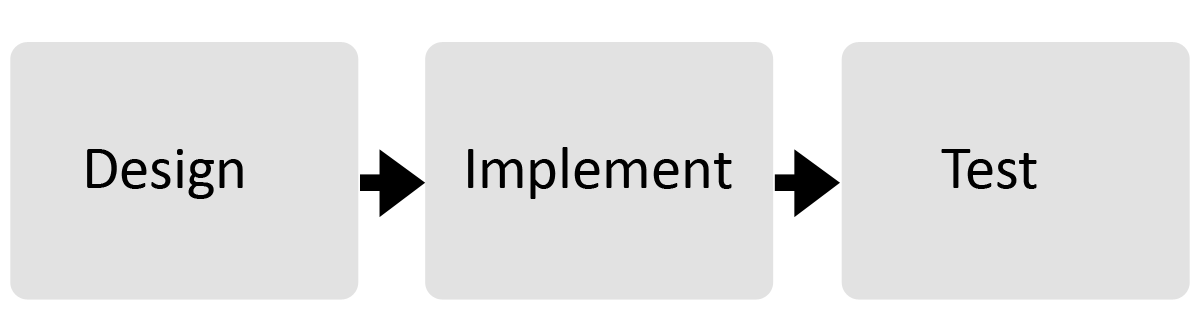
<style>
.page{position:relative;width:1200px;height:333px;background:#e2e2e2}
.page>*{position:absolute;margin:0}
.t1{font:60.7px "Calibri";color:#000000}
</style>
<div class="page">
<p class="t1" style="left:87px;top:149px;width:156px;height:50px">Design</p>
<p class="t1" style="left:468px;top:147px;width:264px;height:52px">Implement</p>
<p class="t1" style="left:941px;top:149px;width:96px;height:40px">Test</p>
</div>
